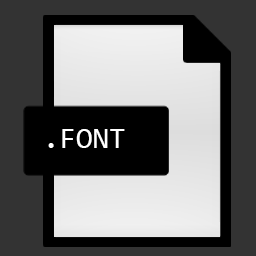
<style>
.page{position:relative;width:256px;height:256px;background:#333333}
.page>*{position:absolute;margin:0}
.t1{font:30px "Consolas";color:#ffffff}
</style>
<div class="page">
<p class="t1" style="left:48px;top:129px;width:77px;height:19px">.FONT</p>
</div>
